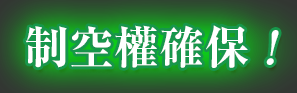
<style>
.page{position:relative;width:297px;height:93px}
.page>*{position:absolute;margin:0}
.t1{font:45px "RyuminPr6N-ExBold";color:#ffffff}
.t2{font:45px "RyuminPr6N-ExBold";color:#ffffff;font-style:italic}
</style>
<div class="page">
<p class="t1" style="left:25px;top:25px;width:254px;height:43px">制空權確保 <span class="t2">!</span></p>
</div>
